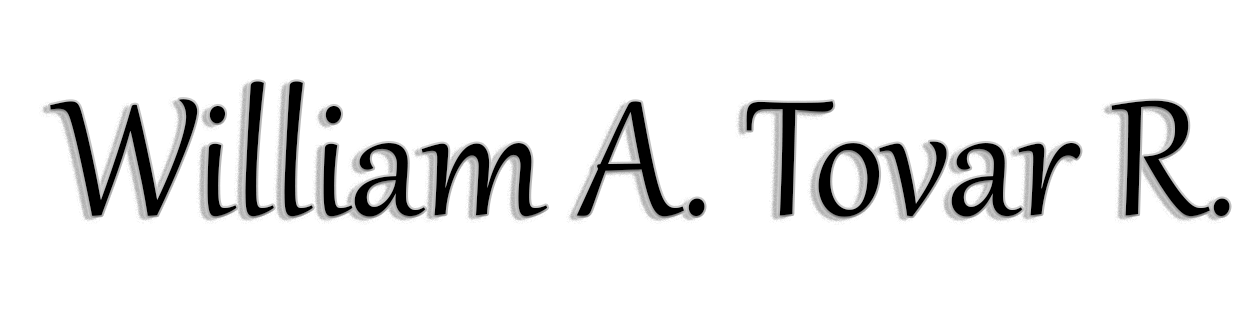
<style>
.page{position:relative;width:1240px;height:320px;background:#ffffff}
.page>*{position:absolute;margin:0}
.t1{font:200px "Gabriola";color:#000000}
</style>
<div class="page">
<p class="t1" style="left:50px;top:81px;width:1180px;height:136px">William A. Tovar R.</p>
</div>
